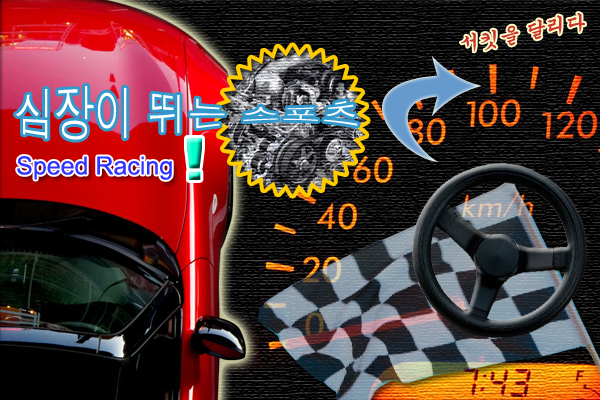
<style>
.page{position:relative;width:600px;height:400px}
.page>*{position:absolute;margin:0}
.t1{font:20px "Gungsuh";color:#cc3333}
.t2{font:40px "Dotum";color:#ffffff}
.t3{font:25px "ArialMT";color:#3333ff}
</style>
<div class="page">
<p class="t1" style="left:460px;top:13px;width:125px;height:39px">서킷을 달리다</p>
<p class="t2" style="left:15px;top:86px;width:343px;height:54px">심장이 뛰는 스포츠</p>
<p class="t3" style="left:17px;top:156px;width:155px;height:24px">Speed Racing</p>
</div>
